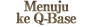
<style>
.page{position:relative;width:91px;height:27px;background:#ffffff}
.page>*{position:absolute;margin:0}
.t1{font:14px/12px "RyuminPro-ExBold";letter-spacing:-0.08em;color:#6d5940;font-weight:bold}
</style>
<div class="page">
<p class="t1" style="left:16px;top:0px;width:61px;height:25px;text-align:center">Menuju<br>ke Q-Base</p>
</div>
